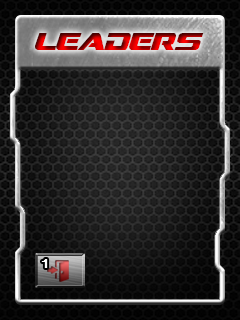
<style>
.page{position:relative;width:240px;height:320px}
.page>*{position:absolute;margin:0}
.t1{font:24px "DreamMMA"}
.t2{font:12px "Fixedsys";color:#ffffff}
</style>
<div class="page">
<p class="t1" style="left:35px;top:33px;width:169px;height:17px">leaders</p>
<p class="t2" style="left:41px;top:259px;width:7px;height:9px">1</p>
</div>
